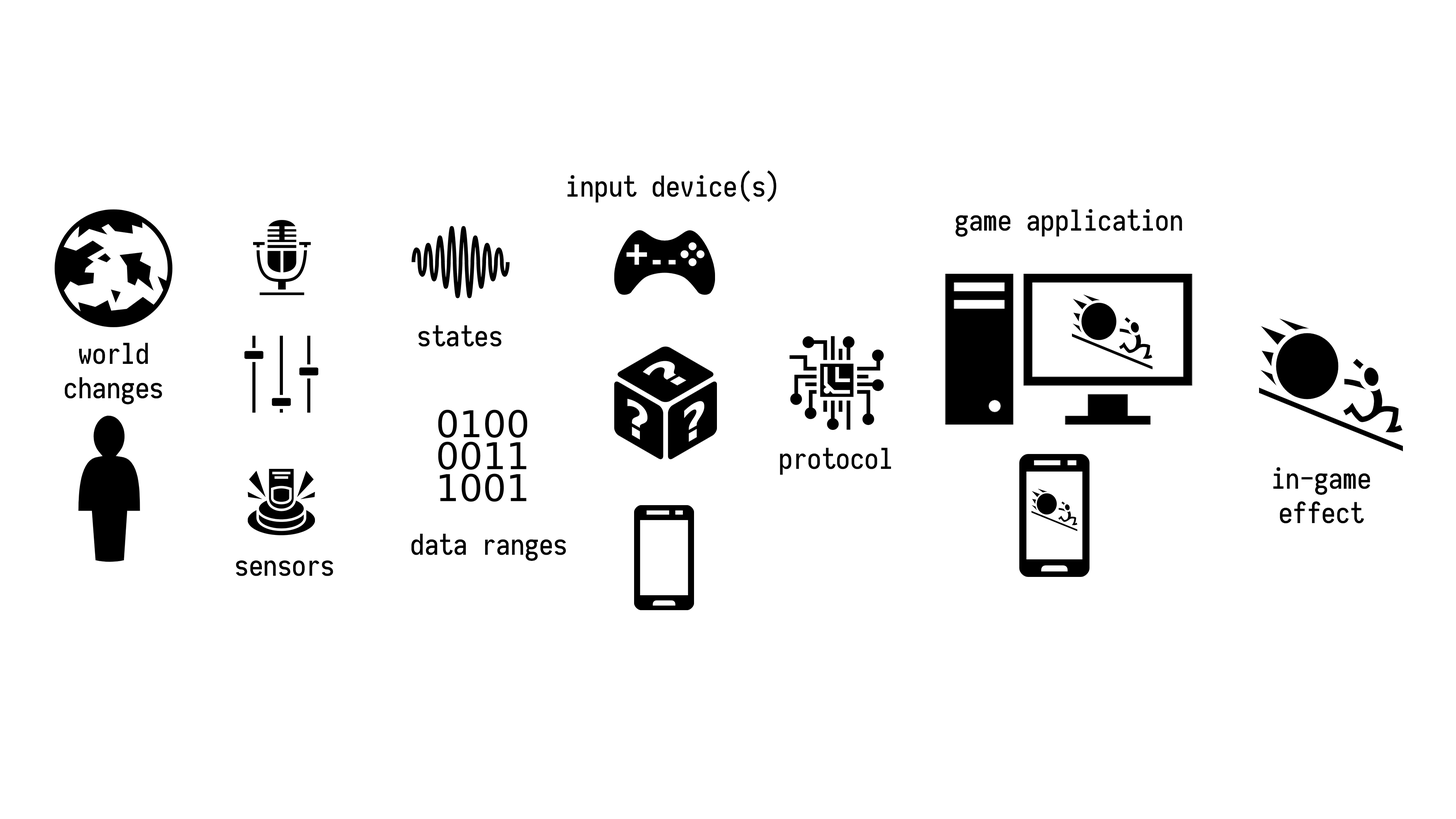
<style>
.page{position:relative;width:1456px;height:819px;background:#ffffff}
.page>*{position:absolute;margin:0}
.t1{font:28.6px "Iosevka-Medium";color:#000000}
</style>
<div class="page">
<p class="t1" style="left:567px;top:170px;width:210px;height:33px">input device(s)</p>
<p class="t1" style="left:956px;top:209px;width:226px;height:28px">game application</p>
<p class="t1" style="left:418px;top:325px;width:84px;height:22px">states</p>
<p class="t1" style="left:65px;top:342px;width:97px;height:62px;text-align:center">world<br>changes</p>
<p class="t1" style="left:780px;top:447px;width:111px;height:28px">protocol</p>
<p class="t1" style="left:1273px;top:467px;width:97px;height:56px;text-align:center">in-game<br>effect</p>
<p class="t1" style="left:411px;top:533px;width:155px;height:28px">data ranges</p>
<p class="t1" style="left:236px;top:560px;width:97px;height:16px">sensors</p>
</div>
